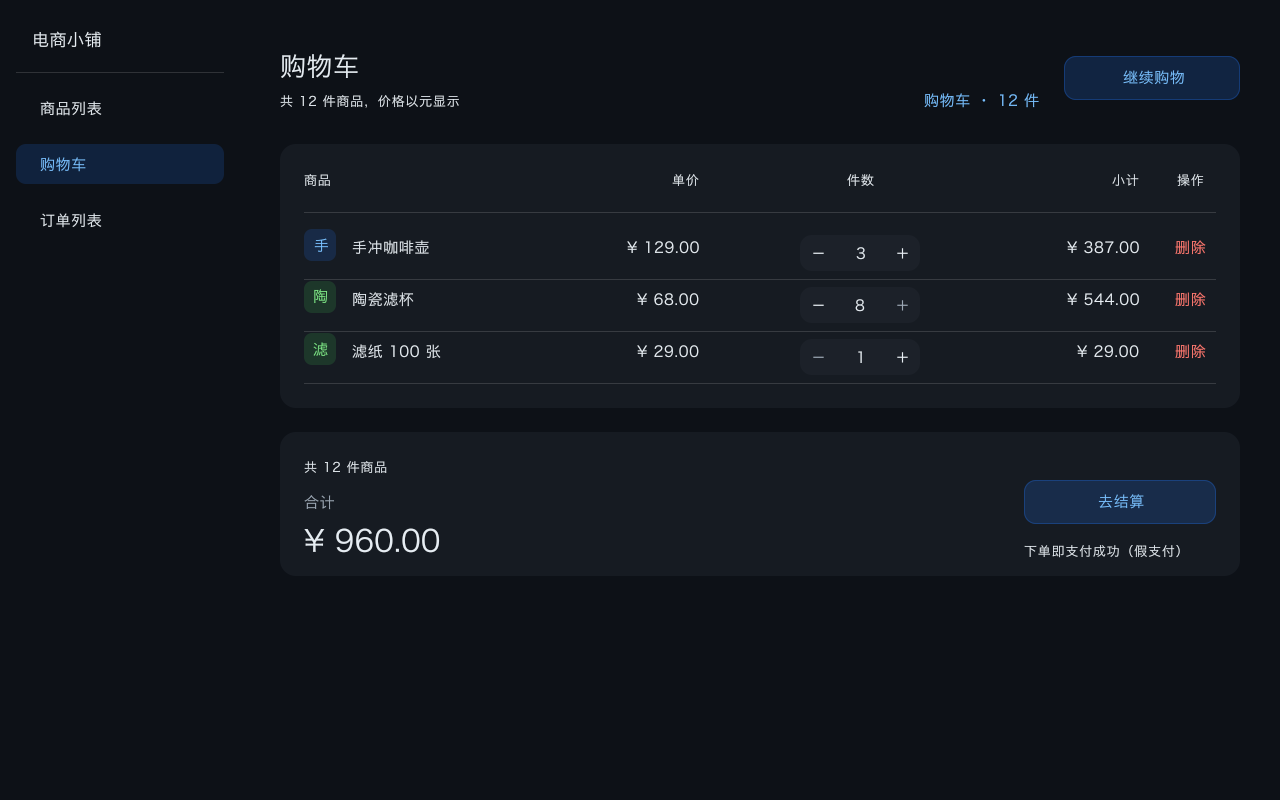
<style>
.page{position:relative;width:1280px;height:800px;background:#0d1117}
.page>*{position:absolute;margin:0}
.t1{font:17px "HiraginoSansGB-Regular";letter-spacing:0.03em;color:#e6edf3}
.t2{font:26px "HiraginoSansGB-Regular";letter-spacing:0.02em;color:#e6edf3}
.t3{font:15px "HiraginoSansGB-Regular";letter-spacing:0.04em;color:#79c0ff}
.t4{font:15px "HiraginoSansGB-Regular";letter-spacing:0.04em;color:#e6edf3}
.t5{font:13px "HiraginoSansGB-Regular";letter-spacing:0.06em;color:#e6edf3}
.t6{font:15px "HiraginoSansGB-Regular";letter-spacing:0.04em;color:#ff7b72}
.t7{font:15px "HiraginoSansGB-Regular";letter-spacing:0.04em;color:#7ee787}
.t8{font:15px "HiraginoSansGB-Regular";letter-spacing:0.04em;color:#9ba7b4}
.t9{font:15px "HiraginoSansGB-Regular";letter-spacing:0.04em}
.t10{font:30px "HiraginoSansGB-Regular";color:#e6edf3}
</style>
<div class="page">
<p class="t1" style="left:33px;top:31px;width:69px;height:18px">电商小铺</p>
<p class="t2" style="left:279px;top:54px;width:80px;height:26px">购物车</p>
<p class="t3" style="left:1122px;top:70px;width:63px;height:16px">继续购物</p>
<p class="t4" style="left:39px;top:101px;width:64px;height:16px">商品列表</p>
<p class="t5" style="left:279px;top:95px;width:181px;height:14px">共 12 件商品，价格以元显示</p>
<p class="t3" style="left:923px;top:93px;width:117px;height:16px">购物车 · 12 件</p>
<p class="t3" style="left:39px;top:157px;width:48px;height:16px">购物车</p>
<p class="t5" style="left:303px;top:174px;width:28px;height:13px">商品</p>
<p class="t5" style="left:671px;top:174px;width:29px;height:13px">单价</p>
<p class="t5" style="left:846px;top:174px;width:29px;height:13px">件数</p>
<p class="t5" style="left:1111px;top:174px;width:29px;height:13px">小计</p>
<p class="t5" style="left:1176px;top:174px;width:29px;height:14px">操作</p>
<p class="t4" style="left:39px;top:213px;width:64px;height:16px">订单列表</p>
<p class="t3" style="left:313px;top:238px;width:16px;height:15px">手</p>
<p class="t4" style="left:351px;top:240px;width:79px;height:15px">手冲咖啡壶</p>
<p class="t4" style="left:626px;top:241px;width:74px;height:14px">¥ 129.00</p>
<p class="t4" style="left:1066px;top:241px;width:74px;height:14px">¥ 387.00</p>
<p class="t6" style="left:1174px;top:240px;width:33px;height:16px">删除</p>
<p class="t4" style="left:813px;top:252px;width:11px;height:2px">－</p>
<p class="t4" style="left:855px;top:247px;width:11px;height:14px">3</p>
<p class="t4" style="left:897px;top:248px;width:11px;height:11px">＋</p>
<p class="t7" style="left:313px;top:289px;width:16px;height:16px">陶</p>
<p class="t4" style="left:352px;top:292px;width:63px;height:16px">陶瓷滤杯</p>
<p class="t4" style="left:636px;top:293px;width:64px;height:14px">¥ 68.00</p>
<p class="t4" style="left:1066px;top:293px;width:74px;height:14px">¥ 544.00</p>
<p class="t6" style="left:1174px;top:292px;width:33px;height:16px">删除</p>
<p class="t4" style="left:813px;top:304px;width:11px;height:2px">－</p>
<p class="t4" style="left:854px;top:299px;width:12px;height:14px">8</p>
<p class="t8" style="left:897px;top:300px;width:11px;height:11px">＋</p>
<p class="t7" style="left:312px;top:342px;width:17px;height:15px">滤</p>
<p class="t4" style="left:351px;top:344px;width:91px;height:16px">滤纸 100 张</p>
<p class="t4" style="left:636px;top:345px;width:64px;height:14px">¥ 29.00</p>
<p class="t9" style="left:858px;top:351px;width:4px;height:12px">1</p>
<p class="t4" style="left:897px;top:352px;width:11px;height:11px">＋</p>
<p class="t4" style="left:1076px;top:345px;width:64px;height:14px">¥ 29.00</p>
<p class="t6" style="left:1174px;top:344px;width:33px;height:16px">删除</p>
<p class="t8" style="left:813px;top:356px;width:11px;height:2px">－</p>
<p class="t5" style="left:303px;top:461px;width:85px;height:13px">共 12 件商品</p>
<p class="t8" style="left:303px;top:495px;width:32px;height:16px">合计</p>
<p class="t3" style="left:1097px;top:494px;width:48px;height:16px">去结算</p>
<p class="t10" style="left:303px;top:528px;width:138px;height:26px">¥ 960.00</p>
<p class="t5" style="left:1023px;top:544px;width:158px;height:15px">下单即支付成功（假支付）</p>
</div>
